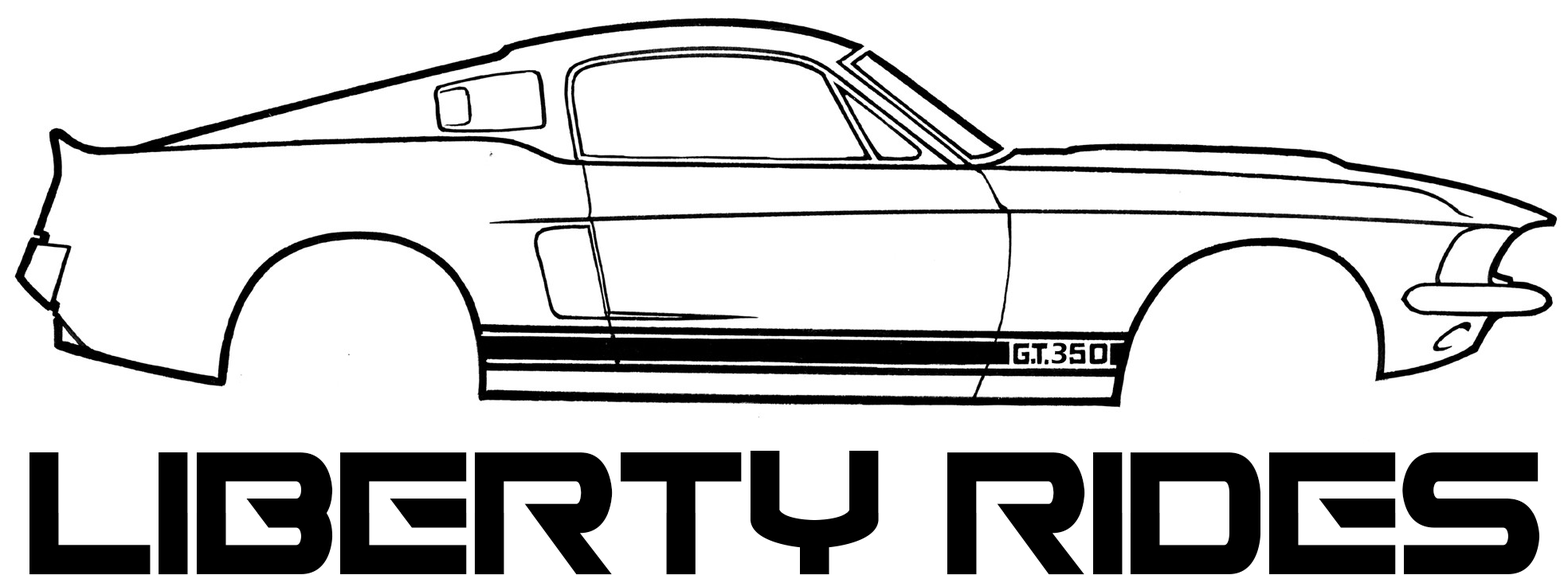
<style>
.page{position:relative;width:1568px;height:575px;background:#ffffff}
.page>*{position:absolute;margin:0}
.t1{font:159.3px "BDNippori-2005";color:#000000;text-transform:uppercase}
</style>
<div class="page">
<p class="t1" style="left:29px;top:451px;width:1511px;height:124px">Liberty Rides</p>
</div>
